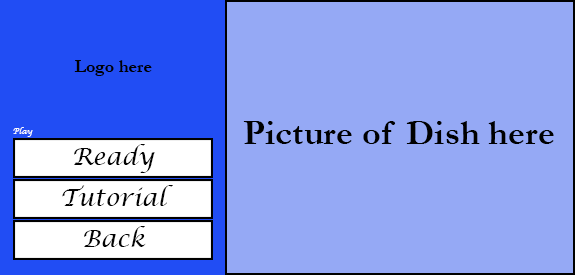
<style>
.page{position:relative;width:575px;height:275px;background:#95a9f5}
.page>*{position:absolute;margin:0}
.t1{font:18px "Garamond-Bold";color:#000000}
.t2{font:36px "Garamond-Bold";color:#000000}
.t3{font:8px "LucidaCalligraphy-Italic";color:#ffffff}
.t4{font:24px "LucidaCalligraphy-Italic";color:#040404}
</style>
<div class="page">
<p class="t1" style="left:74px;top:60px;width:78px;height:16px">Logo here</p>
<p class="t2" style="left:243px;top:121px;width:311px;height:23px">Picture of Dish here</p>
<p class="t3" style="left:13px;top:127px;width:20px;height:10px">Play</p>
<p class="t4" style="left:74px;top:144px;width:81px;height:29px">Ready</p>
<p class="t4" style="left:62px;top:185px;width:111px;height:21px">Tutorial</p>
<p class="t4" style="left:84px;top:226px;width:62px;height:21px">Back</p>
</div>
